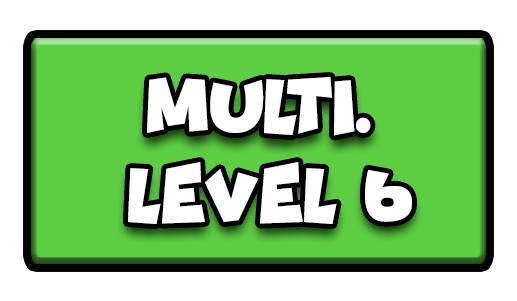
<style>
.page{position:relative;width:517px;height:301px;background:#ffffff}
.page>*{position:absolute;margin:0}
.t1{font:77.7px "Funhouse";color:#ffffff;scale:0.95 1}
</style>
<div class="page">
<p class="t1" style="left:147px;top:77px;width:224px;height:59px">MULTI.</p>
<p class="t1" style="left:128px;top:162px;width:284px;height:62px">LEVEL 6</p>
</div>
